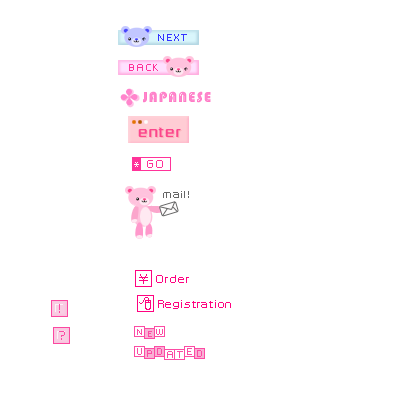
<style>
.page{position:relative;width:400px;height:400px;background:#ffffff}
.page>*{position:absolute;margin:0}
.t1{font:11px "RussellSquare";letter-spacing:0.1em;color:#3333ff}
.t2{font:11px "RussellSquare";letter-spacing:0.075em;color:#ff3399}
.t3{font:15px "Bauhaus93";letter-spacing:0.075em;color:#ff85cc}
.t4{font:16px "RussellSquare";letter-spacing:0.075em;color:#fc468c}
.t5{font:12px "RussellSquare";letter-spacing:0.075em;color:#ff3399}
.t6{font:12px "RussellSquare";letter-spacing:0.075em;color:#ffffff}
.t7{font:11px "RussellSquare";letter-spacing:0.075em;color:#666666}
.t8{font:12px/27px "RussellSquare";letter-spacing:0.025em;color:#ff0280}
.t9{font:14px/27px "Osaka";color:#ffffff}
.t10{font:14px/27px "Osaka";letter-spacing:0.26em;color:#ff0280}
.t11{font:12px/27px "RussellSquare";letter-spacing:0.075em;color:#ff0280}
.t12{font:15px/27px "Wingdings";letter-spacing:0.34em;color:#ff0280}
.t13{font:13px/27px "RussellSquare";letter-spacing:0.075em;color:#fc4ba4}
.t14{font:8px "RussellSquare";letter-spacing:0.075em;color:#fc4ba4}
.t15{font:11px "RussellSquare";letter-spacing:0.075em;color:#fc4ba4}
</style>
<div class="page">
<p class="t1" style="left:158px;top:34px;width:29px;height:7px">NEXT</p>
<p class="t2" style="left:129px;top:64px;width:29px;height:7px">BACK</p>
<p class="t3" style="left:143px;top:91px;width:68px;height:12px">JAPANESE</p>
<p class="t4" style="left:138px;top:127px;width:43px;height:10px">enter</p>
<p class="t5" style="left:147px;top:160px;width:16px;height:8px">GO</p>
<p class="t6" style="left:134px;top:162px;width:5px;height:5px">*</p>
<p class="t7" style="left:163px;top:191px;width:26px;height:7px">mail!</p>
<p class="t8" style="left:131px;top:273px;width:100px;height:37px"><span class="t9">1</span><span class="t10">￥</span><span class="t11">Order<br>  </span><span class="t12">8</span>Registration</p>
<p class="t13" style="left:59px;top:304px;width:6px;height:36px">!<br>?</p>
<p class="t14" style="left:137px;top:329px;width:5px;height:6px">N</p>
<p class="t14" style="left:156px;top:329px;width:7px;height:6px">W</p>
<p class="t14" style="left:148px;top:331px;width:4px;height:6px">E</p>
<p class="t15" style="left:137px;top:348px;width:5px;height:7px">U</p>
<p class="t15" style="left:147px;top:350px;width:5px;height:7px">P</p>
<p class="t15" style="left:157px;top:348px;width:5px;height:7px">D</p>
<p class="t15" style="left:167px;top:351px;width:6px;height:7px">A</p>
<p class="t15" style="left:177px;top:351px;width:6px;height:7px">T</p>
<p class="t15" style="left:187px;top:348px;width:5px;height:7px">E</p>
<p class="t15" style="left:197px;top:350px;width:5px;height:7px">D</p>
</div>
